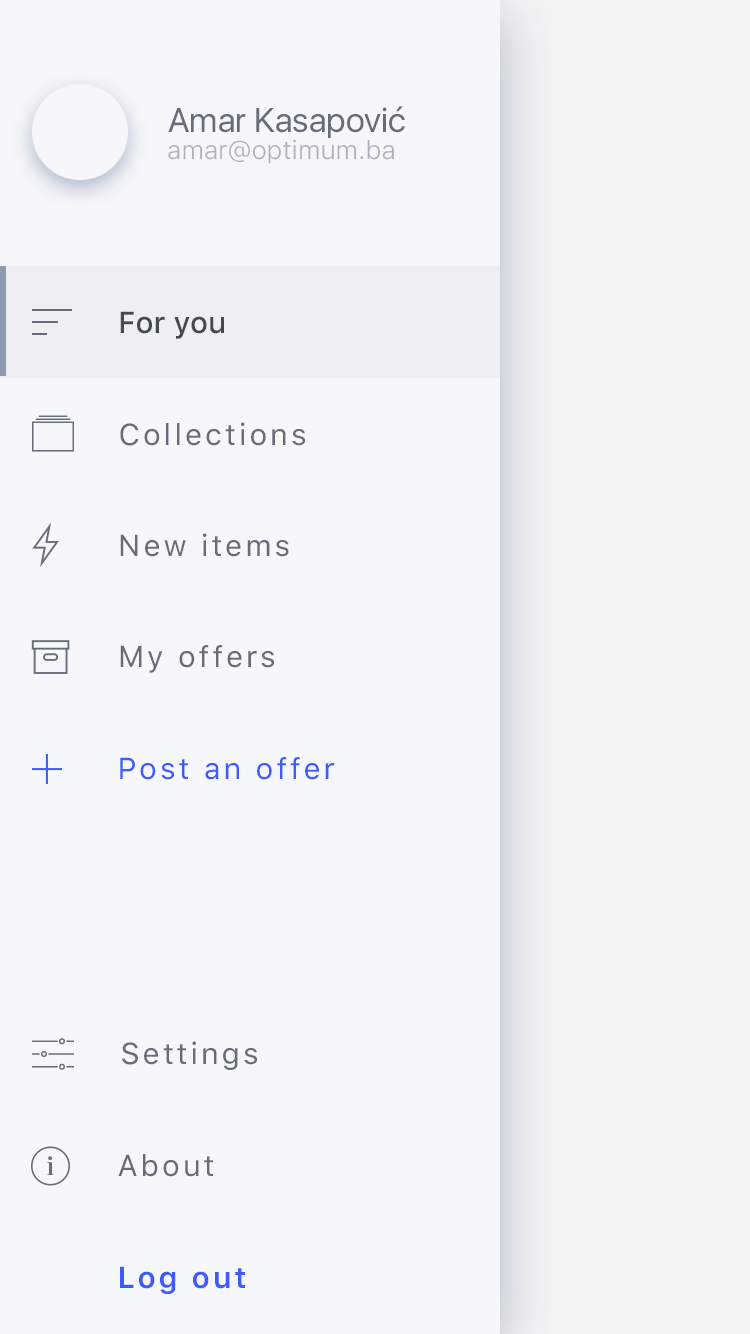
<style>
.page{position:relative;width:750px;height:1334px;background:#f5f7fa}
.page>*{position:absolute;margin:0}
.t1{font:34px "SFUIDisplay-Regular";color:#656d78}
.t2{font:26px "SFUIText-Light";color:#aab2bd}
.t3{font:30px "SFUIText-Medium";color:#434a54}
.t4{font:30px "SFUIText-Regular";letter-spacing:0.1em;color:#656d78}
.t5{font:30px "SFUIText-Regular";letter-spacing:0.1em;color:#3d5afe}
.t6{font:30px "SFUIText-Semibold";letter-spacing:0.1em;color:#3d5afe}
</style>
<div class="page">
<p class="t1" style="left:168px;top:106px;width:237px;height:32px">Amar Kasapović</p>
<p class="t2" style="left:168px;top:139px;width:226px;height:25px">amar@optimum.ba</p>
<p class="t3" style="left:120px;top:311px;width:104px;height:28px">For you</p>
<p class="t4" style="left:120px;top:422px;width:185px;height:24px">Collections</p>
<p class="t4" style="left:120px;top:533px;width:169px;height:24px">New items</p>
<p class="t4" style="left:120px;top:645px;width:154px;height:28px">My offers</p>
<p class="t5" style="left:120px;top:757px;width:215px;height:23px">Post an offer</p>
<p class="t4" style="left:122px;top:1041px;width:135px;height:29px">Settings</p>
<p class="t4" style="left:118px;top:1154px;width:95px;height:23px">About</p>
<p class="t6" style="left:120px;top:1266px;width:125px;height:28px">Log out</p>
</div>
